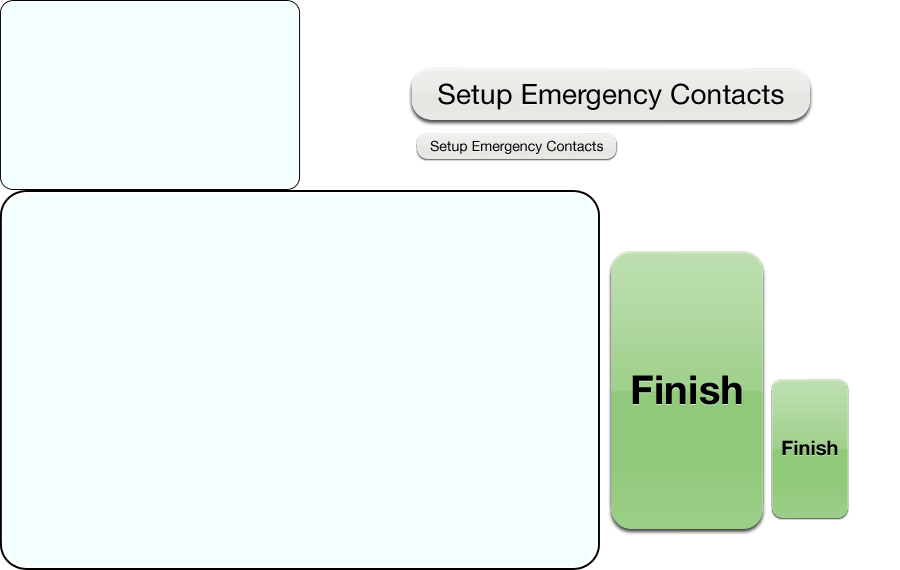
<style>
.page{position:relative;width:900px;height:570px;background:#f3feff}
.page>*{position:absolute;margin:0}
.t1{font:28px "HelveticaNeue";letter-spacing:0.005em;color:#000000}
.t2{font:14px "HelveticaNeue";letter-spacing:0.005em;color:#000000}
.t3{font:40px "HelveticaNeue-Bold";letter-spacing:0.005em;color:#000000}
.t4{font:20px "HelveticaNeue-Bold";letter-spacing:0.005em;color:#000000}
</style>
<div class="page">
<p class="t1" style="left:438px;top:83px;width:346px;height:27px">Setup Emergency Contacts</p>
<p class="t2" style="left:430px;top:140px;width:173px;height:14px">Setup Emergency Contacts</p>
<p class="t3" style="left:632px;top:375px;width:110px;height:30px">Finish</p>
<p class="t4" style="left:782px;top:440px;width:56px;height:16px">Finish</p>
</div>
